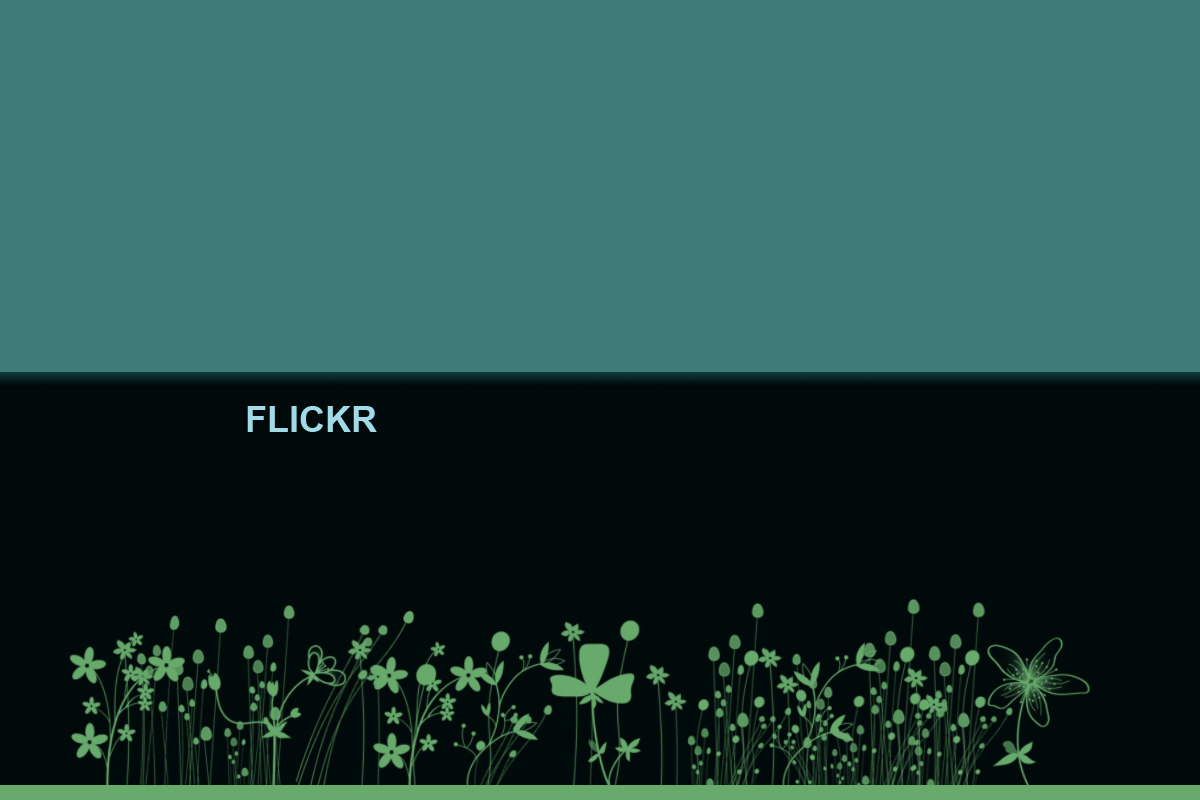
<style>
.page{position:relative;width:1200px;height:800px;background:#3f7b79}
.page>*{position:absolute;margin:0}
.t1{font:36px "Arial-BoldMT";color:#a1dbe7}
</style>
<div class="page">
<p class="t1" style="left:247px;top:406px;width:130px;height:26px">FLICKR</p>
</div>
